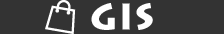
<style>
.page{position:relative;width:224px;height:34px;background:#333333}
.page>*{position:absolute;margin:0}
.t1{font:36px "LithosPro-Bold";color:#ffffff;font-weight:bold}
</style>
<div class="page">
<p class="t1" style="left:91px;top:3px;width:62px;height:27px">GIS</p>
</div>
